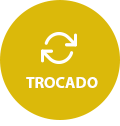
<style>
.page{position:relative;width:120px;height:126px;background:#dbb90a}
.page>*{position:absolute;margin:0}
.t1{font:16px "MyriadPro-Bold";color:#ffffff;text-transform:uppercase}
</style>
<div class="page">
<p class="t1" style="left:26px;top:77px;width:72px;height:11px">trocado</p>
</div>
